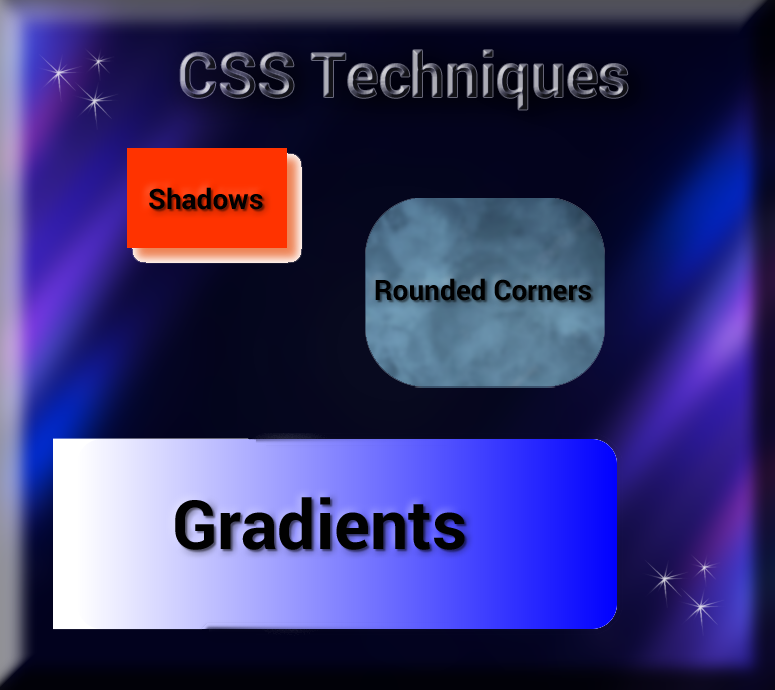
<style>
.page{position:relative;width:775px;height:690px}
.page>*{position:absolute;margin:0}
.t1{font:61.5px "Roboto-Bold"}
.t2{font:28px "Roboto-Bold";color:#000000}
.t3{font:68px "Roboto-Bold";color:#010101}
</style>
<div class="page">
<p class="t1" style="left:180px;top:50px;width:448px;height:60px">CSS Techniques</p>
<p class="t2" style="left:149px;top:187px;width:114px;height:23px">Shadows</p>
<p class="t2" style="left:375px;top:278px;width:216px;height:23px">Rounded Corners</p>
<p class="t3" style="left:175px;top:497px;width:290px;height:53px">Gradients</p>
</div>
